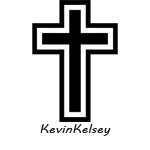
<style>
.page{position:relative;width:150px;height:150px;background:#ffffff}
.page>*{position:absolute;margin:0}
.t1{font:12px "MVBoli";color:#231f20;scale:1.1 1}
</style>
<div class="page">
<p class="t1" style="left:40px;top:124px;width:71px;height:12px">KevinKelsey</p>
</div>
